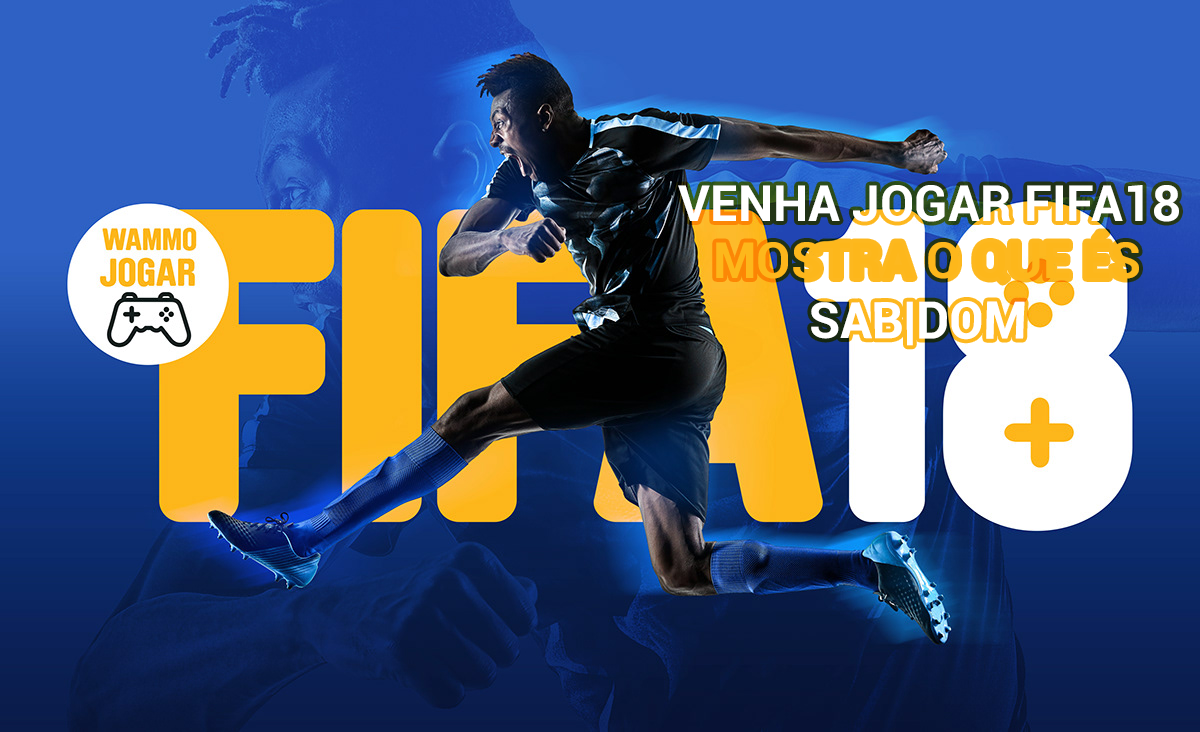
<style>
.page{position:relative;width:1200px;height:732px}
.page>*{position:absolute;margin:0}
.t1{font:50px "Roboto-Bold";color:#ffffff}
.t2{font:12px/0px "Roboto-Bold";color:#fdb71b;text-transform:uppercase}
.t3{font:12px/0px "Roboto-Bold";color:#ffffff}
</style>
<div class="page">
<p class="t1" style="left:678px;top:185px;width:501px;height:37px">VENHA JOGAR FIFA18</p>
<p class="t2" style="left:716px;top:232px;width:423px;height:50px">Mostra o que és</p>
<p class="t3" style="left:811px;top:301px;width:214px;height:45px">SAB|DOM</p>
</div>
